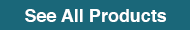
<style>
.page{position:relative;width:190px;height:30px;background:#1a6779}
.page>*{position:absolute;margin:0}
.t1{font:18px "Helvetica-Bold";color:#ffffff}
</style>
<div class="page">
<p class="t1" style="left:25px;top:9px;width:141px;height:13px">See All Products</p>
</div>
